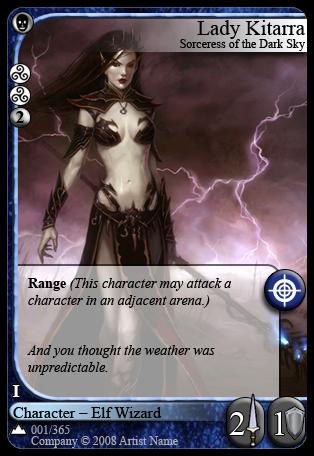
<style>
.page{position:relative;width:314px;height:456px}
.page>*{position:absolute;margin:0}
.t1{font:12px/13px "TimesNewRomanPSMT";color:#000000}
.t2{font:21px/13px "TimesNewRomanPSMT";color:#000000}
.t3{font:19px "TimesNewRomanPS-BoldMT";color:#000000}
.t4{font:14px "TimesNewRomanPS-ItalicMT";color:#000000}
.t5{font:14px "TimesNewRomanPS-BoldMT";color:#000000}
.t6{font:19px "TimesNewRomanPS-BoldMT";color:#ffffff}
.t7{font:16px "TimesNewRomanPSMT";color:#000000}
.t8{font:34px "TimesNewRomanPSMT";color:#ffffff}
.t9{font:12px/11px "TimesNewRomanPSMT";color:#aeaeae}
</style>
<div class="page">
<p class="t1" style="left:180px;top:20px;width:126px;height:31px;text-align:right"><span class="t2">Lady Kitarra<br></span>Sorceress of the Dark Sky</p>
<p class="t3" style="left:15px;top:111px;width:9px;height:12px">2</p>
<p class="t4" style="left:27px;top:278px;width:204px;height:97px"><span class="t5">Range </span>(This character may attack a character in an adjacent arena.)<br><br><br>And you thought the weather was <br>unpredictable.</p>
<p class="t6" style="left:12px;top:385px;width:8px;height:12px">I</p>
<p class="t7" style="left:13px;top:407px;width:149px;height:11px">Character – Elf Wizard</p>
<p class="t8" style="left:229px;top:412px;width:16px;height:23px">2</p>
<p class="t8" style="left:275px;top:412px;width:9px;height:23px">1</p>
<p class="t9" style="left:31px;top:425px;width:147px;height:23px">001/365<br>  Company © 2008 Artist Name</p>
</div>
